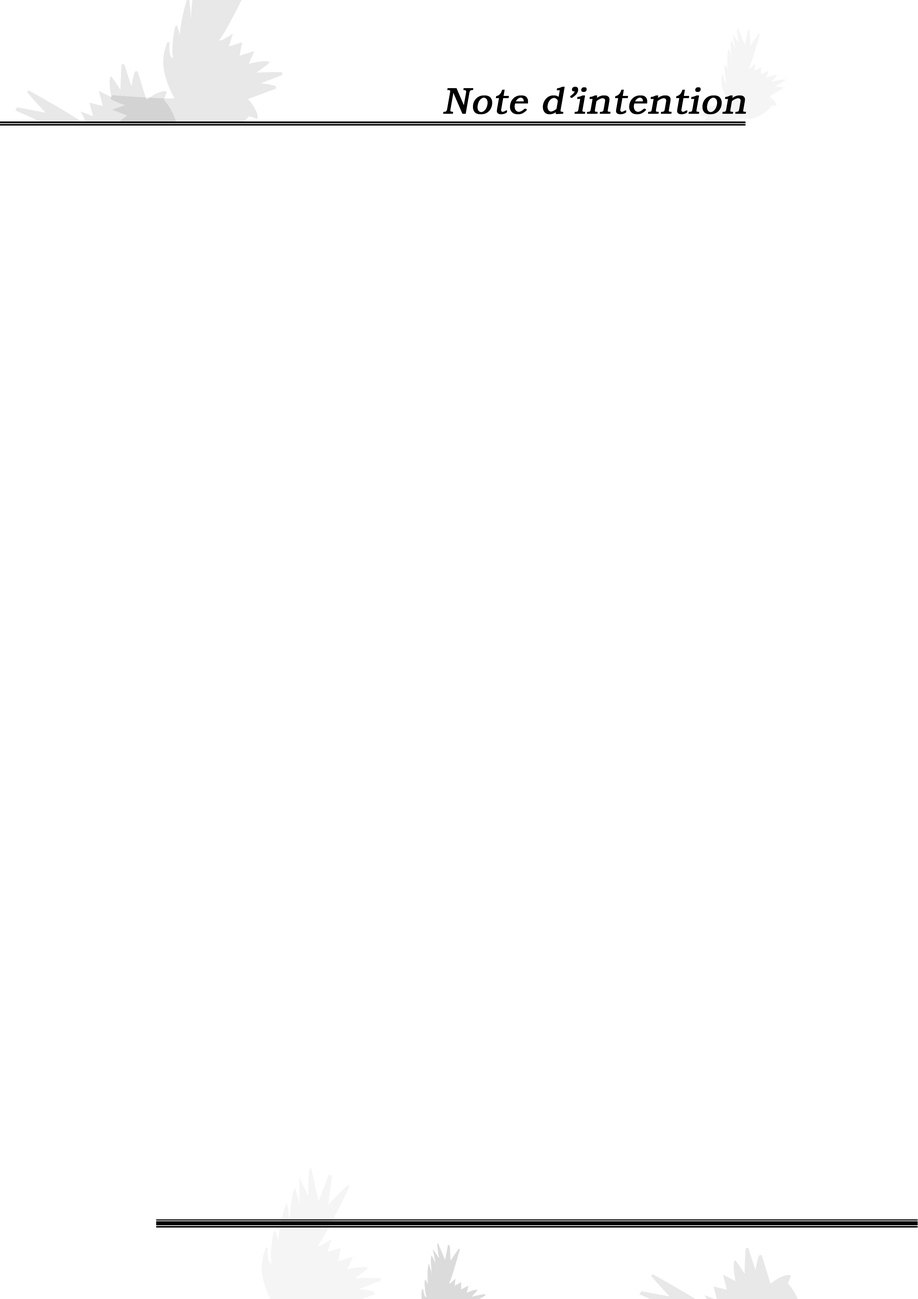
<style>
.page{position:relative;width:918px;height:1299px;background:#ffffff}
.page>*{position:absolute;margin:0}
.t1{font:37px "BookmanOldStyle";color:#000000;font-weight:bold;font-style:italic}
</style>
<div class="page">
<p class="t1" style="left:443px;top:87px;width:303px;height:27px">Note d’intention</p>
</div>
